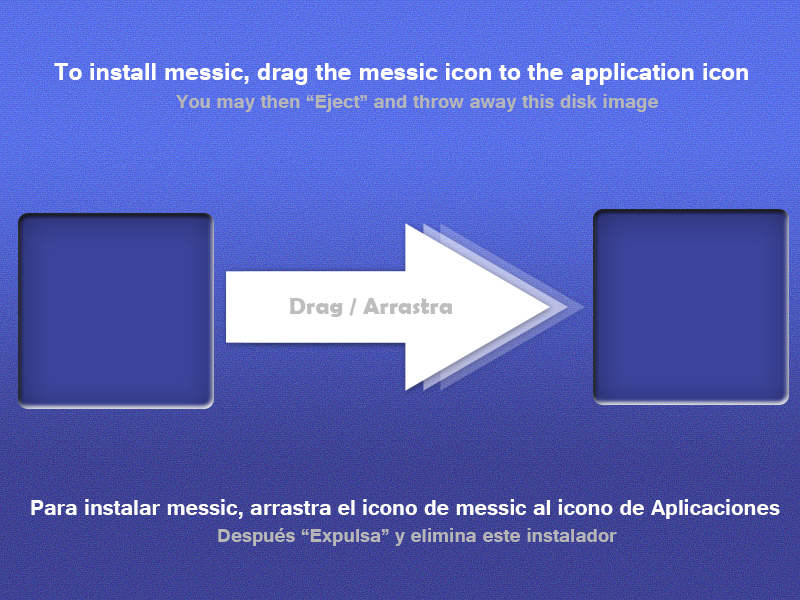
<style>
.page{position:relative;width:800px;height:600px}
.page>*{position:absolute;margin:0}
.t1{font:30px "Tunga-Bold";color:#ffffff}
.t2{font:24px "Tunga-Bold";color:#b7b7b7}
.t3{font:24px "BerlinSansFBDemi-Bold";color:#bebebe}
.t4{font:27px "Tunga-Bold";color:#ffffff}
</style>
<div class="page">
<p class="t1" style="left:54px;top:63px;width:694px;height:22px">To install messic, drag the messic icon to the application icon</p>
<p class="t2" style="left:176px;top:94px;width:482px;height:18px">You may then “Eject” and throw away this disk image</p>
<p class="t3" style="left:290px;top:298px;width:163px;height:19px">Drag / Arrastra</p>
<p class="t4" style="left:31px;top:499px;width:749px;height:20px">Para instalar messic, arrastra el icono de messic al icono de Aplicaciones</p>
<p class="t2" style="left:218px;top:528px;width:399px;height:18px">Después “Expulsa” y elimina este instalador</p>
</div>
